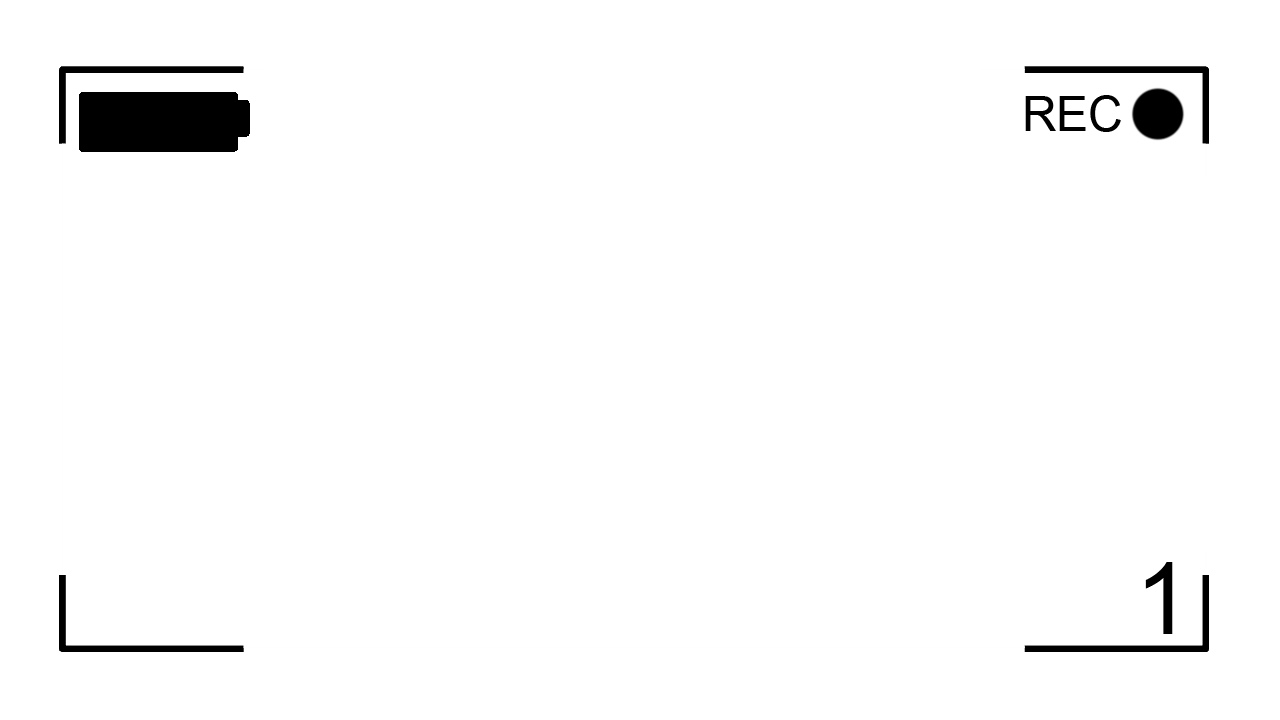
<style>
.page{position:relative;width:1280px;height:720px;background:#ffffff}
.page>*{position:absolute;margin:0}
.t1{font:48px "ArialMT";color:#000000}
.t2{font:100px "ArialMT";color:#000000}
</style>
<div class="page">
<p class="t1" style="left:1025px;top:95px;width:96px;height:37px">REC</p>
<p class="t2" style="left:1145px;top:562px;width:28px;height:72px">1</p>
</div>
